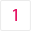
<style>
.page{position:relative;width:31px;height:31px;background:#ffffff}
.page>*{position:absolute;margin:0}
.t1{font:18px "MyriadPro-Regular";color:#e51464}
</style>
<div class="page">
<p class="t1" style="left:13px;top:9px;width:4px;height:12px">1</p>
</div>
